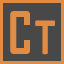
<style>
.page{position:relative;width:64px;height:64px;background:#484848}
.page>*{position:absolute;margin:0}
.t1{font:56px "AgencyFB-Bold";color:#e18c44;scale:0.92 1}
.t2{font:52.9px "Calibri-Bold";color:#e18c44;scale:0.77 1}
</style>
<div class="page">
<p class="t1" style="left:10px;top:11px;width:20px;height:43px">C</p>
<p class="t2" style="left:35px;top:20px;width:20px;height:35px">T</p>
</div>
